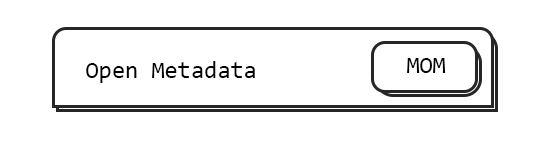
<style>
.page{position:relative;width:550px;height:145px;background:#ffffff}
.page>*{position:absolute;margin:0}
.t1{font:24px "Consolas";color:#010101}
</style>
<div class="page">
<p class="t1" style="left:86px;top:61px;width:169px;height:22px">Open Metadata</p>
<p class="t1" style="left:407px;top:58px;width:39px;height:15px">MOM</p>
</div>
